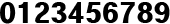
<style>
.page{position:relative;width:170px;height:24px;background:#ffffff}
.page>*{position:absolute;margin:0}
.t1{font:24px "HeadlineR-HM";color:#000000}
</style>
<div class="page">
<p class="t1" style="left:0px;top:2px;width:170px;height:22px">0123456789</p>
</div>
